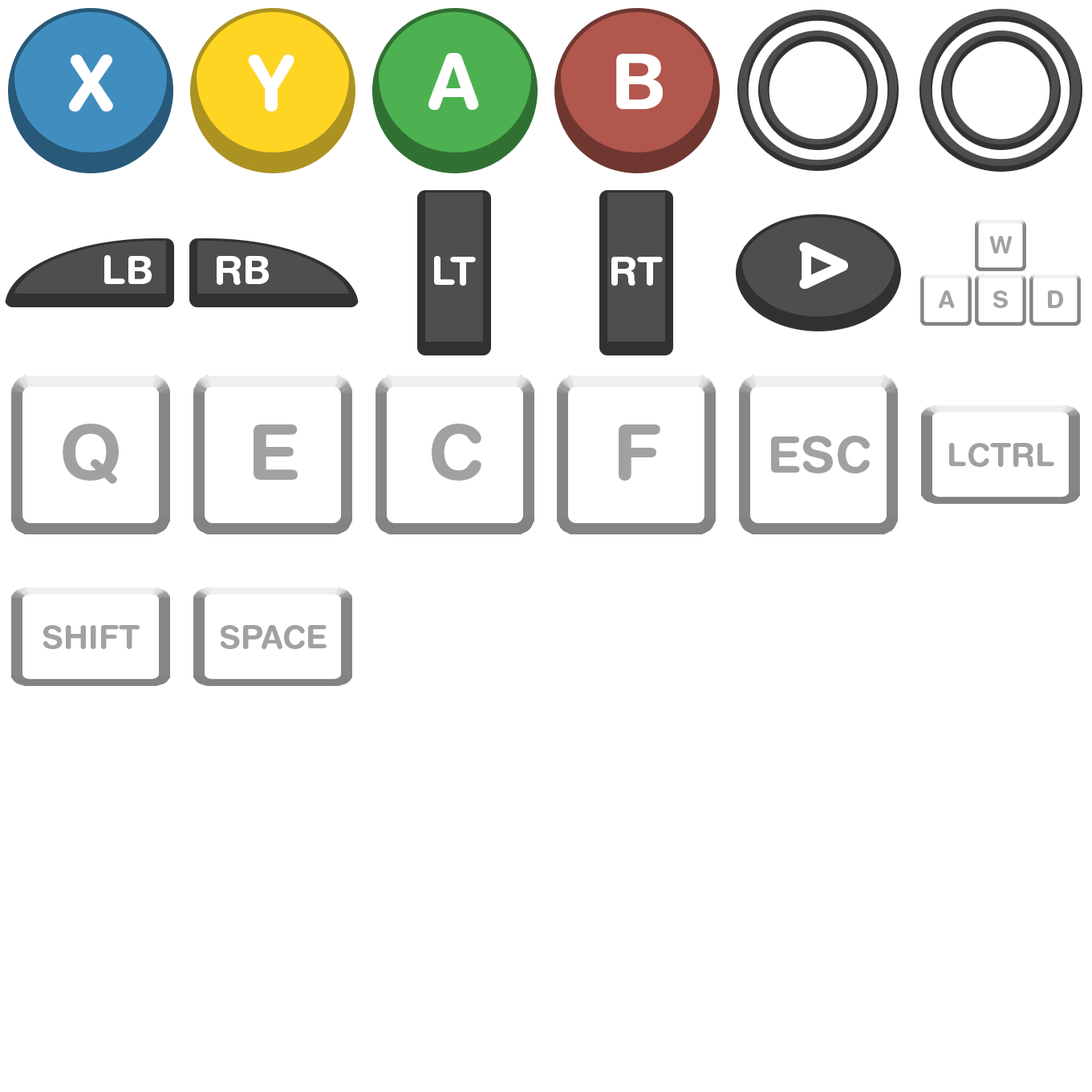
<style>
.page{position:relative;width:1092px;height:1092px;background:#ffffff}
.page>*{position:absolute;margin:0}
.t1{font:77px "HelveticaRounded-Bold";color:#ffffff}
.t2{font:90.2px "HelveticaRounded-Bold";color:#ffffff}
.t3{font:24.1px "HelveticaRounded-Bold";color:#a1a1a1}
.t4{font:39.3px "HelveticaRounded-Bold";color:#ffffff}
.t5{font:77px "HelveticaRounded-Bold";color:#a1a1a1}
.t6{font:49.8px "HelveticaRounded-Bold";color:#a1a1a1}
.t7{font:32.1px "HelveticaRounded-Bold";color:#a1a1a1}
</style>
<div class="page">
<p class="t1" style="left:428px;top:53px;width:51px;height:57px">A</p>
<p class="t1" style="left:616px;top:54px;width:47px;height:55px">B</p>
<p class="t1" style="left:69px;top:55px;width:44px;height:57px">X</p>
<p class="t1" style="left:248px;top:55px;width:46px;height:57px">Y</p>
<p class="t2" style="left:799px;top:242px;width:49px;height:47px">&gt;</p>
<p class="t3" style="left:989px;top:236px;width:23px;height:18px">W</p>
<p class="t4" style="left:104px;top:255px;width:48px;height:29px">LB</p>
<p class="t4" style="left:217px;top:256px;width:52px;height:29px">RB</p>
<p class="t4" style="left:434px;top:256px;width:42px;height:30px">LT</p>
<p class="t4" style="left:611px;top:257px;width:52px;height:29px">RT</p>
<p class="t3" style="left:939px;top:290px;width:16px;height:18px">A</p>
<p class="t3" style="left:993px;top:290px;width:15px;height:18px">S</p>
<p class="t3" style="left:1048px;top:290px;width:15px;height:18px">D</p>
<p class="t5" style="left:63px;top:424px;width:56px;height:60px">Q</p>
<p class="t5" style="left:254px;top:424px;width:44px;height:56px">E</p>
<p class="t5" style="left:432px;top:424px;width:49px;height:57px">C</p>
<p class="t5" style="left:619px;top:424px;width:41px;height:57px">F</p>
<p class="t6" style="left:771px;top:436px;width:99px;height:37px">ESC</p>
<p class="t7" style="left:949px;top:443px;width:105px;height:24px">LCTRL</p>
<p class="t7" style="left:43px;top:625px;width:97px;height:24px">SHIFT</p>
<p class="t7" style="left:221px;top:625px;width:106px;height:24px">SPACE</p>
</div>
